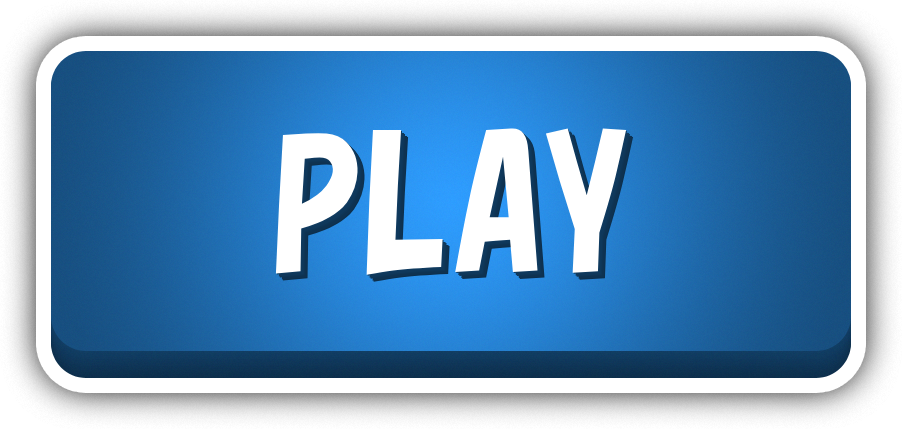
<style>
.page{position:relative;width:902px;height:429px}
.page>*{position:absolute;margin:0}
.t1{font:180px "HGPSoeiKakupoptai";color:#ffffff}
</style>
<div class="page">
<p class="t1" style="left:275px;top:127px;width:352px;height:148px">PLAY</p>
</div>
